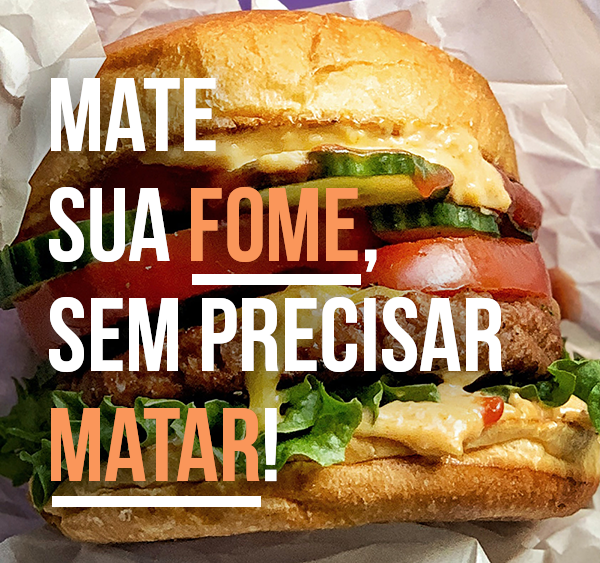
<style>
.page{position:relative;width:600px;height:563px}
.page>*{position:absolute;margin:0}
.t1{font:105px/110px "BebasNeue-Bold";color:#ffffff}
.t2{font:105px/110px "BebasNeue-Bold";color:#fa965a}
</style>
<div class="page">
<p class="t1" style="left:49px;top:78px;width:454px;height:404px">Mate <br>Sua <span class="t2">Fome</span>, <br>Sem Precisar <span class="t2">Matar</span>!</p>
<p class="t1" style="left:49px;top:78px;width:454px;height:404px">Mate <br>Sua <span class="t2">Fome</span>, <br>Sem Precisar <span class="t2">Matar</span>!</p>
</div>
